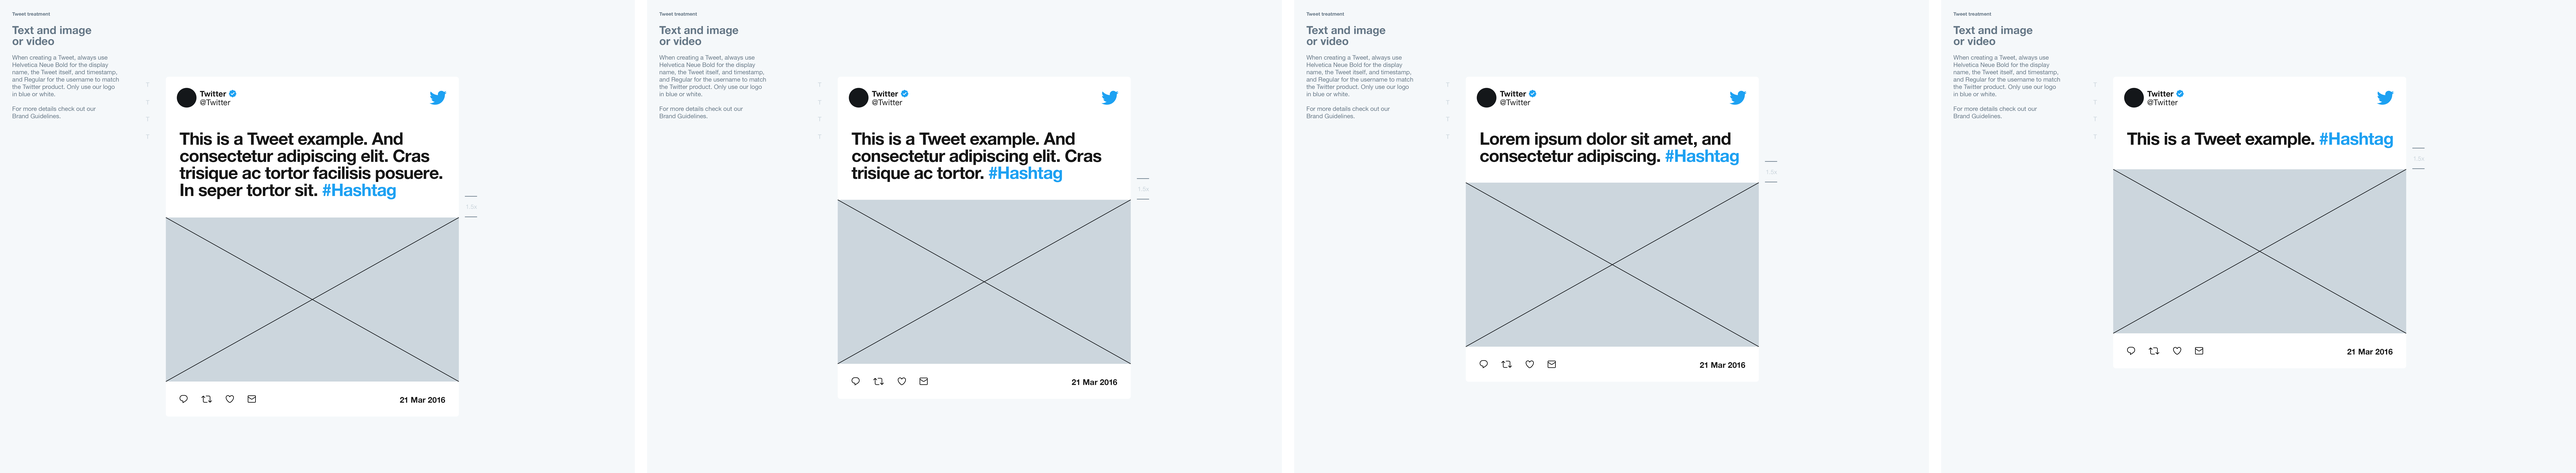
<style>
.page{position:relative;width:2576px;height:473px;background:#f5f8fa}
.page>*{position:absolute;margin:0}
.t1{font:6.1px "HelveticaNeue";color:#657786}
.t2{font:4.9px/11px "HelveticaNeue-Bold";color:#657786}
.t3{font:11px/11px "HelveticaNeue-Bold";color:#657786}
.t4{font:6.1px "HelveticaNeueLTPro-Roman";letter-spacing:0.015em;color:#ccd6dd}
.t5{font:7.9px "HelveticaNeue-Bold";color:#161616}
.t6{font:7.9px "HelveticaNeue";letter-spacing:0.015em;color:#161616}
.t7{font:17.1px/17.1px "HelveticaNeue-Bold";letter-spacing:-0.025em;color:#161616}
.t8{font:17.1px/17.1px "HelveticaNeue-Bold";letter-spacing:-0.025em;color:#1da1f2}
.t9{font:17.1px "HelveticaNeue-Bold";letter-spacing:-0.025em;color:#161616}
.t10{font:17.1px "HelveticaNeue-Bold";letter-spacing:-0.025em;color:#1da1f2}
</style>
<div class="page">
<p class="t1" style="left:12px;top:12px;width:107px;height:106px"><span class="t2">Tweet treatment<br><br></span><span class="t3">Text and image<br>or video<br></span><br>When creating a Tweet, always use Helvetica Neue Bold for the display name, the Tweet itself, and timestamp, and Regular for the username to match the Twitter product. Only use our logo in blue or white. <br><br>For more details check out our<br>Brand Guidelines.</p>
<p class="t1" style="left:659px;top:12px;width:107px;height:106px"><span class="t2">Tweet treatment<br><br></span><span class="t3">Text and image<br>or video<br></span><br>When creating a Tweet, always use Helvetica Neue Bold for the display name, the Tweet itself, and timestamp, and Regular for the username to match the Twitter product. Only use our logo in blue or white. <br><br>For more details check out our<br>Brand Guidelines.</p>
<p class="t1" style="left:1306px;top:12px;width:107px;height:106px"><span class="t2">Tweet treatment<br><br></span><span class="t3">Text and image<br>or video<br></span><br>When creating a Tweet, always use Helvetica Neue Bold for the display name, the Tweet itself, and timestamp, and Regular for the username to match the Twitter product. Only use our logo in blue or white. <br><br>For more details check out our<br>Brand Guidelines.</p>
<p class="t1" style="left:1953px;top:12px;width:107px;height:106px"><span class="t2">Tweet treatment<br><br></span><span class="t3">Text and image<br>or video<br></span><br>When creating a Tweet, always use Helvetica Neue Bold for the display name, the Tweet itself, and timestamp, and Regular for the username to match the Twitter product. Only use our logo in blue or white. <br><br>For more details check out our<br>Brand Guidelines.</p>
<p class="t4" style="left:2093px;top:82px;width:4px;height:5px">T</p>
<p class="t5" style="left:200px;top:91px;width:26px;height:6px">Twitter</p>
<p class="t6" style="left:200px;top:99px;width:30px;height:6px">@Twitter</p>
<p class="t5" style="left:872px;top:91px;width:26px;height:6px">Twitter</p>
<p class="t6" style="left:872px;top:99px;width:30px;height:6px">@Twitter</p>
<p class="t5" style="left:1500px;top:91px;width:26px;height:6px">Twitter</p>
<p class="t6" style="left:1500px;top:99px;width:30px;height:6px">@Twitter</p>
<p class="t4" style="left:2093px;top:100px;width:4px;height:4px">T</p>
<p class="t5" style="left:2147px;top:91px;width:27px;height:6px">Twitter</p>
<p class="t6" style="left:2147px;top:99px;width:31px;height:6px">@Twitter</p>
<p class="t4" style="left:2093px;top:117px;width:4px;height:4px">T</p>
<p class="t7" style="left:179px;top:132px;width:263px;height:67px">This is a Tweet example. And<br>consectetur adipiscing elit. Cras <br>trisique ac tortor facilisis posuere.<br>In seper tortor sit. <span class="t8">#Hashtag</span></p>
<p class="t7" style="left:851px;top:132px;width:250px;height:50px">This is a Tweet example. And<br>consectetur adipiscing elit. Cras <br>trisique ac tortor. <span class="t8">#Hashtag</span></p>
<p class="t7" style="left:1480px;top:132px;width:259px;height:33px">Lorem ipsum dolor sit amet, and<br>consectetur adipiscing. <span class="t8">#Hashtag</span></p>
<p class="t4" style="left:2093px;top:134px;width:4px;height:5px">T</p>
<p class="t9" style="left:2127px;top:132px;width:266px;height:16px">This is a Tweet example. <span class="t10">#Hashtag</span></p>
<p class="t4" style="left:2414px;top:156px;width:11px;height:5px">1.5x</p>
<p class="t5" style="left:2347px;top:349px;width:46px;height:6px">21 Mar 2016</p>
<p class="t5" style="left:1700px;top:362px;width:45px;height:6px">21 Mar 2016</p>
<p class="t5" style="left:1072px;top:379px;width:45px;height:6px">21 Mar 2016</p>
<p class="t5" style="left:400px;top:397px;width:45px;height:6px">21 Mar 2016</p>
</div>
